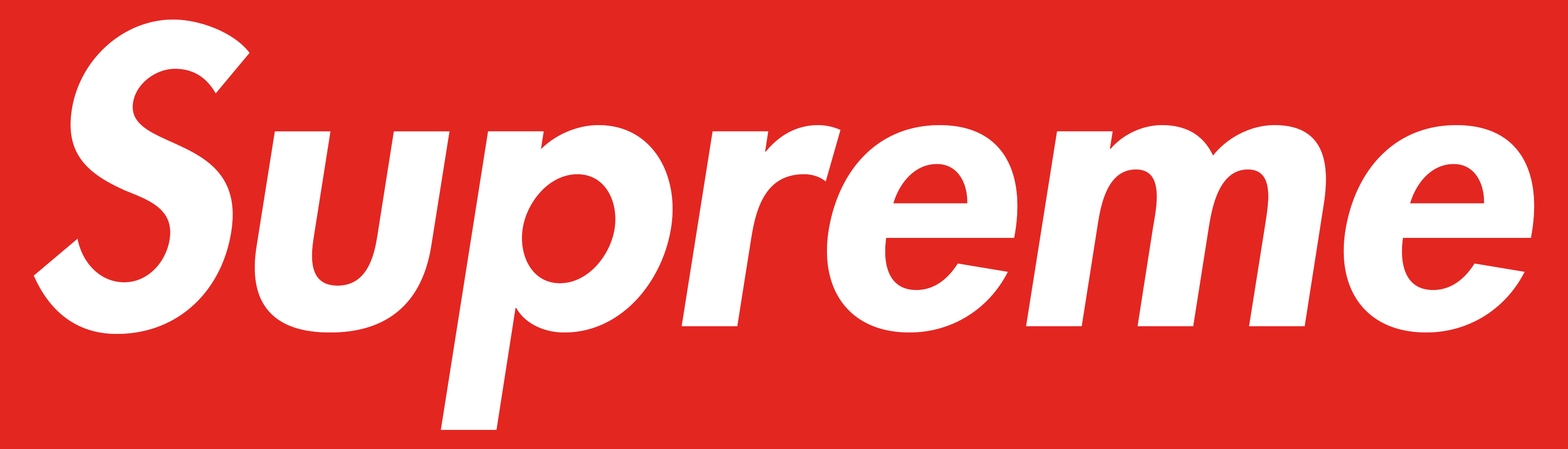
<style>
.page{position:relative;width:1568px;height:449px;background:#e42621}
.page>*{position:absolute;margin:0}
.t1{font:396.8px "FuturaStd-HeavyOblique";color:#ffffff}
</style>
<div class="page">
<p class="t1" style="left:33px;top:19px;width:1502px;height:411px">Supreme</p>
</div>
